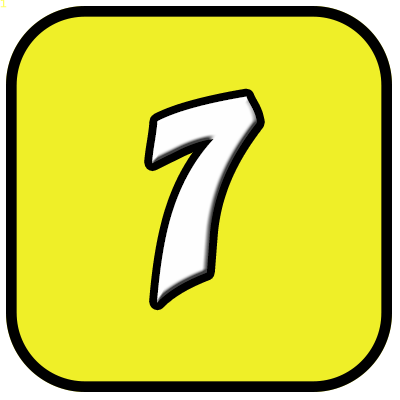
<style>
.page{position:relative;width:400px;height:400px;background:#efef28}
.page>*{position:absolute;margin:0}
.t1{font:10.7px "LucidaConsole";color:#ffff66}
.t2{font:240px "Yikes";color:#fefefe}
</style>
<div class="page">
<p class="t1" style="left:0px;top:0px;width:7px;height:8px">1</p>
<p class="t2" style="left:152px;top:96px;width:105px;height:207px">7</p>
</div>
